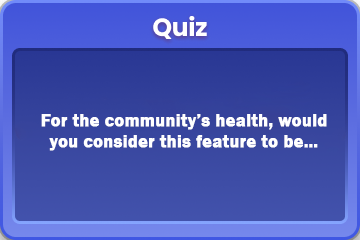
<style>
.page{position:relative;width:360px;height:240px}
.page>*{position:absolute;margin:0}
.t1{font:18px "FranklinGothic-Demi";color:#ffffff;font-weight:bold}
</style>
<div class="page">
<p class="t1" style="left:41px;top:114px;width:286px;height:37px;text-align:center">For the community’s health, would you consider this feature to be…</p>
</div>
